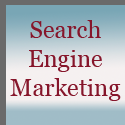
<style>
.page{position:relative;width:125px;height:125px}
.page>*{position:absolute;margin:0}
.t1{font:24px "Georgia";color:#86162b}
</style>
<div class="page">
<p class="t1" style="left:10px;top:20px;width:111px;height:81px;text-align:center">Search<br>Engine<br>Marketing</p>
</div>
